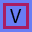
<style>
.page{position:relative;width:32px;height:32px;background:#697df4}
.page>*{position:absolute;margin:0}
.t1{font:20px "MyriadPro-Regular";color:#000000}
</style>
<div class="page">
<p class="t1" style="left:10px;top:9px;width:12px;height:14px">V</p>
</div>
